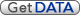
<style>
.page{position:relative;width:80px;height:15px}
.page>*{position:absolute;margin:0}
.t1{font:13.5px "AvenirNext-Regular";color:#515151;font-weight:bold;scale:1.06 1}
.t2{font:14px "Avenir-Roman";color:#003699;font-weight:bold;scale:1.06 1}
</style>
<div class="page">
<p class="t1" style="left:7px;top:2px;width:25px;height:11px">Get</p>
<p class="t2" style="left:35px;top:2px;width:39px;height:11px">DATA</p>
</div>
